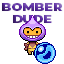
<style>
.page{position:relative;width:64px;height:64px;background:#ffffff}
.page>*{position:absolute;margin:0}
.t1{font:10px "Montserrat-Black";letter-spacing:-0.011em;scale:1.3 1}
</style>
<div class="page">
<p class="t1" style="left:2px;top:3px;width:61px;height:20px;text-align:center">BOMBER<br>DUDE</p>
</div>
